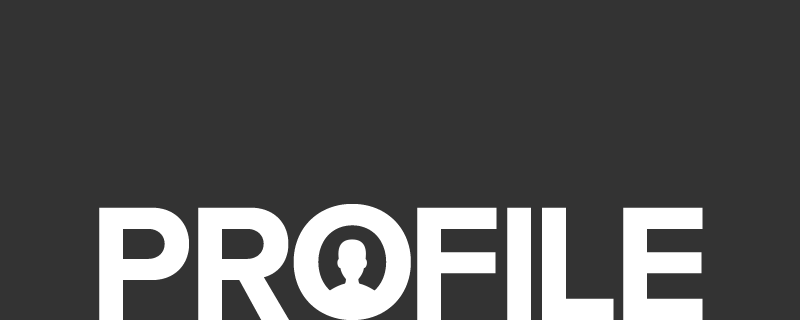
<style>
.page{position:relative;width:800px;height:320px;background:#333333}
.page>*{position:absolute;margin:0}
.t1{font:168.3px "ProximaNova-Bold";letter-spacing:-0.08em;color:#ffffff;text-transform:uppercase}
</style>
<div class="page">
<p class="t1" style="left:99px;top:204px;width:604px;height:117px">Profile</p>
</div>
